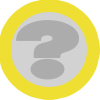
<style>
.page{position:relative;width:100px;height:100px;background:#efdf33}
.page>*{position:absolute;margin:0}
.t1{font:84px "STHupo";color:#acacac;font-weight:bold;scale:1.68 1}
</style>
<div class="page">
<p class="t1" style="left:16px;top:20px;width:63px;height:60px">?</p>
</div>
